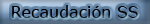
<style>
.page{position:relative;width:150px;height:24px}
.page>*{position:absolute;margin:0}
.t1{font:16px "Verdana";color:#000000}
</style>
<div class="page">
<p class="t1" style="left:12px;top:5px;width:126px;height:13px">Recaudación SS</p>
</div>
